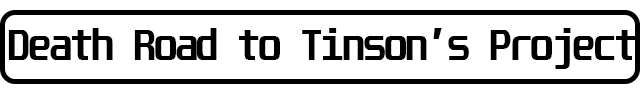
<style>
.page{position:relative;width:640px;height:96px;background:#ffffff}
.page>*{position:absolute;margin:0}
.t1{font:38px "Unispace-Bold";letter-spacing:-0.06em;color:#000000}
</style>
<div class="page">
<p class="t1" style="left:8px;top:28px;width:628px;height:41px">Death Road to Tinson’s Project</p>
</div>
